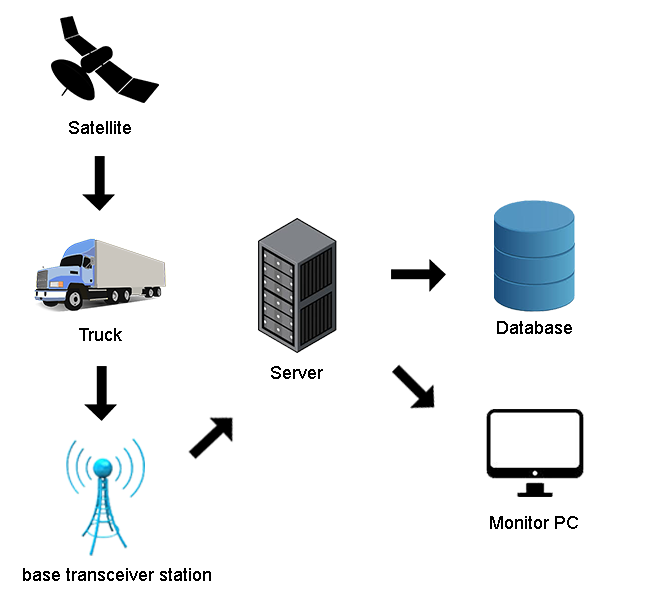
<style>
.page{position:relative;width:650px;height:600px;background:#ffffff}
.page>*{position:absolute;margin:0}
.t1{font:18px "ArialMT";color:#000000}
</style>
<div class="page">
<p class="t1" style="left:69px;top:121px;width:62px;height:13px">Satellite</p>
<p class="t1" style="left:79px;top:328px;width:43px;height:13px">Truck</p>
<p class="t1" style="left:497px;top:321px;width:75px;height:13px">Database</p>
<p class="t1" style="left:271px;top:366px;width:52px;height:13px">Server</p>
<p class="t1" style="left:490px;top:516px;width:88px;height:13px">Monitor PC</p>
<p class="t1" style="left:23px;top:568px;width:188px;height:13px">base transceiver station</p>
</div>
